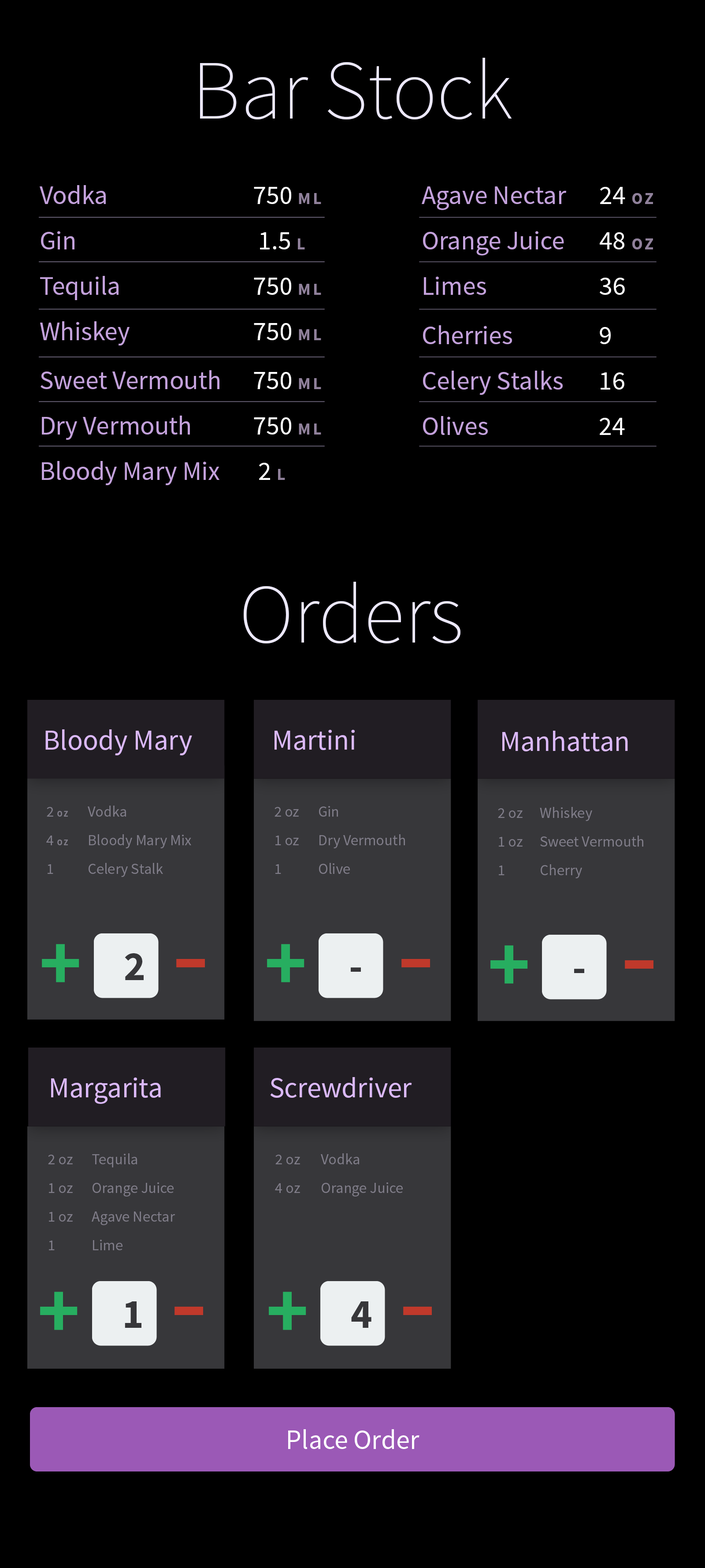
<style>
.page{position:relative;width:705px;height:1568px;background:#000000}
.page>*{position:absolute;margin:0}
.t1{font:84.5px "SourceSansPro-ExtraLight";color:#ece8fc}
.t2{font:26.4px/45.5px "SourceSansPro-Regular";color:#c3a1db}
.t3{font:26.4px/45.5px "SourceSansPro-Regular";color:#ffffff}
.t4{font:16.7px/45.5px "SourceSansPro-Bold";letter-spacing:0.135em;color:#90819b;text-transform:uppercase}
.t5{font:28.6px "SourceSansPro-Regular";color:#dbb9f9}
.t6{font:8.3px/28.6px "SourceSansPro-Bold";letter-spacing:0.135em;color:#807d89;text-transform:uppercase}
.t7{font:15.2px/28.6px "SourceSansPro-Regular";color:#807d89}
.t8{font:80.4px "SourceSansPro-Bold";letter-spacing:0.05em;color:#27ae60}
.t9{font:41.1px "SourceSansPro-Bold";letter-spacing:0.05em;color:#37373a}
.t10{font:80.4px "SourceSansPro-Bold";letter-spacing:0.05em;color:#c0392b;scale:1.44 1}
.t11{font:27.5px "SourceSansPro-Regular";color:#ffffff}
</style>
<div class="page">
<p class="t1" style="left:200px;top:58px;width:312px;height:61px">Bar Stock</p>
<p class="t2" style="left:40px;top:185px;width:90px;height:161px">Vodka<br>Gin<br>Tequila<br>Whiskey</p>
<p class="t3" style="left:254px;top:187px;width:67px;height:153px">750 <span class="t4">ml<br></span> 1.5 <span class="t4">L<br></span>750 <span class="t4">ML<br></span>750 <span class="t4">ml</span></p>
<p class="t2" style="left:422px;top:186px;width:144px;height:109px">Agave Nectar<br>Orange Juice<br>Limes</p>
<p class="t3" style="left:600px;top:187px;width:53px;height:108px">24 <span class="t4">oz<br></span>48 <span class="t4">oz<br></span>36</p>
<p class="t2" style="left:423px;top:325px;width:140px;height:110px">Cherries<br>Celery Stalks<br>Olives</p>
<p class="t3" style="left:600px;top:327px;width:25px;height:108px">9<br>16<br>24</p>
<p class="t2" style="left:41px;top:370px;width:178px;height:115px">Sweet Vermouth<br>Dry Vermouth<br>Bloody Mary Mix</p>
<p class="t3" style="left:254px;top:372px;width:67px;height:108px">750 <span class="t4">ml<br></span>750 <span class="t4">ml<br></span> 2 <span class="t4">l</span></p>
<p class="t1" style="left:244px;top:582px;width:217px;height:61px">Orders</p>
<p class="t5" style="left:45px;top:729px;width:147px;height:26px">Bloody Mary</p>
<p class="t5" style="left:275px;top:730px;width:80px;height:20px">Martini</p>
<p class="t5" style="left:502px;top:731px;width:126px;height:20px">Manhattan</p>
<p class="t6" style="left:46px;top:807px;width:22px;height:67px"><span class="t7">2 </span>oz <br><span class="t7">4 </span>oz<br><span class="t7">1</span></p>
<p class="t7" style="left:88px;top:806px;width:103px;height:71px">Vodka<br>Bloody Mary Mix<br>Celery Stalk</p>
<p class="t7" style="left:275px;top:807px;width:24px;height:67px">2 oz <br>1 oz<br>1</p>
<p class="t7" style="left:319px;top:806px;width:86px;height:68px">Gin<br>Dry Vermouth<br>Olive</p>
<p class="t7" style="left:498px;top:808px;width:25px;height:67px">2 oz <br>1 oz<br>1</p>
<p class="t7" style="left:540px;top:807px;width:103px;height:71px">Whiskey<br>Sweet Vermouth<br>Cherry</p>
<p class="t8" style="left:42px;top:944px;width:37px;height:38px">+</p>
<p class="t9" style="left:125px;top:953px;width:19px;height:27px">2</p>
<p class="t8" style="left:267px;top:944px;width:38px;height:38px">+</p>
<p class="t8" style="left:490px;top:945px;width:38px;height:39px">+</p>
<p class="t10" style="left:176px;top:959px;width:29px;height:8px">-</p>
<p class="t10" style="left:401px;top:959px;width:29px;height:8px">-</p>
<p class="t10" style="left:625px;top:960px;width:29px;height:9px">-</p>
<p class="t9" style="left:351px;top:967px;width:10px;height:5px">-</p>
<p class="t9" style="left:574px;top:969px;width:10px;height:4px">-</p>
<p class="t5" style="left:51px;top:1078px;width:110px;height:26px">Margarita</p>
<p class="t5" style="left:270px;top:1077px;width:142px;height:21px">Screwdriver</p>
<p class="t7" style="left:48px;top:1155px;width:25px;height:95px">2 oz <br>1 oz<br>1 oz<br>1</p>
<p class="t7" style="left:92px;top:1153px;width:83px;height:97px">Tequila<br>Orange Juice<br>Agave Nectar<br>Lime</p>
<p class="t7" style="left:275px;top:1155px;width:25px;height:38px">2 oz <br>4 oz</p>
<p class="t7" style="left:321px;top:1153px;width:82px;height:43px">Vodka<br>Orange Juice</p>
<p class="t8" style="left:40px;top:1292px;width:38px;height:38px">+</p>
<p class="t9" style="left:125px;top:1301px;width:16px;height:27px">1</p>
<p class="t8" style="left:269px;top:1292px;width:37px;height:38px">+</p>
<p class="t9" style="left:351px;top:1301px;width:21px;height:27px">4</p>
<p class="t10" style="left:175px;top:1307px;width:28px;height:8px">-</p>
<p class="t10" style="left:403px;top:1307px;width:29px;height:8px">-</p>
<p class="t11" style="left:288px;top:1429px;width:132px;height:20px">Place Order</p>
</div>
